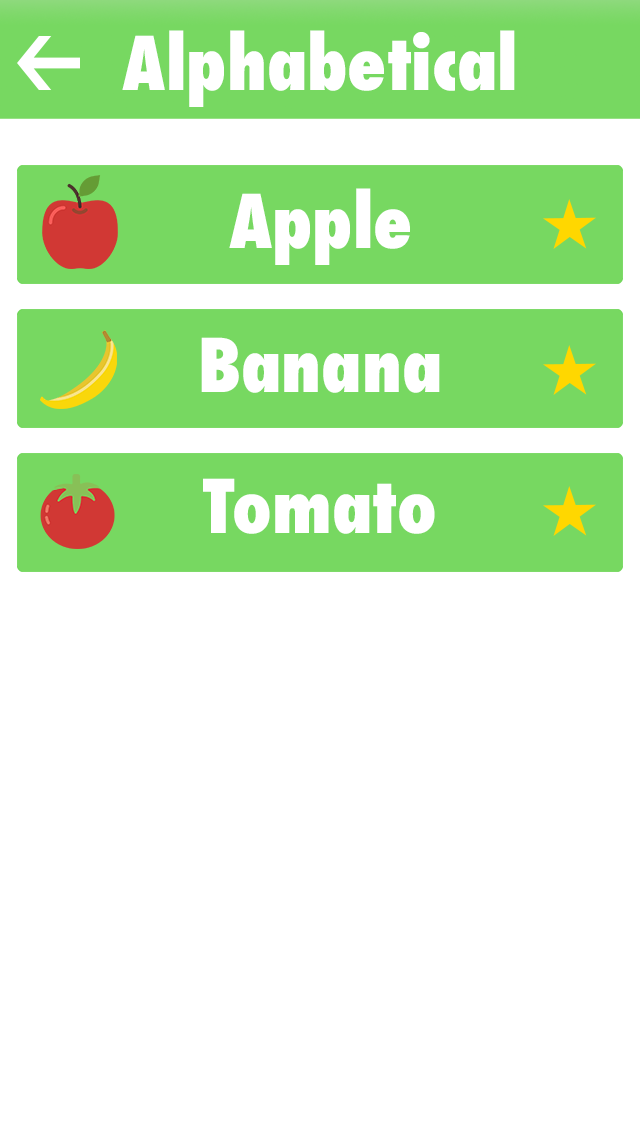
<style>
.page{position:relative;width:640px;height:1136px;background:#ffffff}
.page>*{position:absolute;margin:0}
.t1{font:72px "Futura-CondensedExtraBold";color:#ffffff}
</style>
<div class="page">
<p class="t1" style="left:122px;top:30px;width:393px;height:77px">Alphabetical</p>
<p class="t1" style="left:229px;top:188px;width:181px;height:77px">Apple</p>
<p class="t1" style="left:201px;top:337px;width:239px;height:56px">Banana</p>
<p class="t1" style="left:203px;top:478px;width:232px;height:56px">Tomato</p>
</div>
